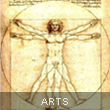
<style>
.page{position:relative;width:110px;height:110px}
.page>*{position:absolute;margin:0}
.t1{font:10px "ArialMT";color:#e3e2da}
</style>
<div class="page">
<p class="t1" style="left:41px;top:98px;width:27px;height:7px">ARTS</p>
</div>
